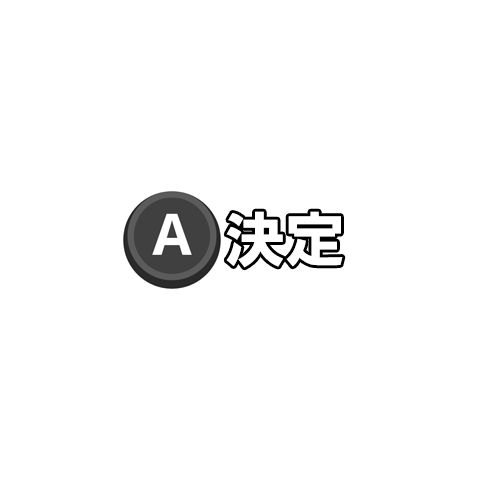
<style>
.page{position:relative;width:480px;height:480px;background:#ffffff}
.page>*{position:absolute;margin:0}
.t1{font:60px "HGSSoeiKakugothicUB";color:#ffffff}
</style>
<div class="page">
<p class="t1" style="left:226px;top:211px;width:117px;height:57px">決定</p>
</div>
